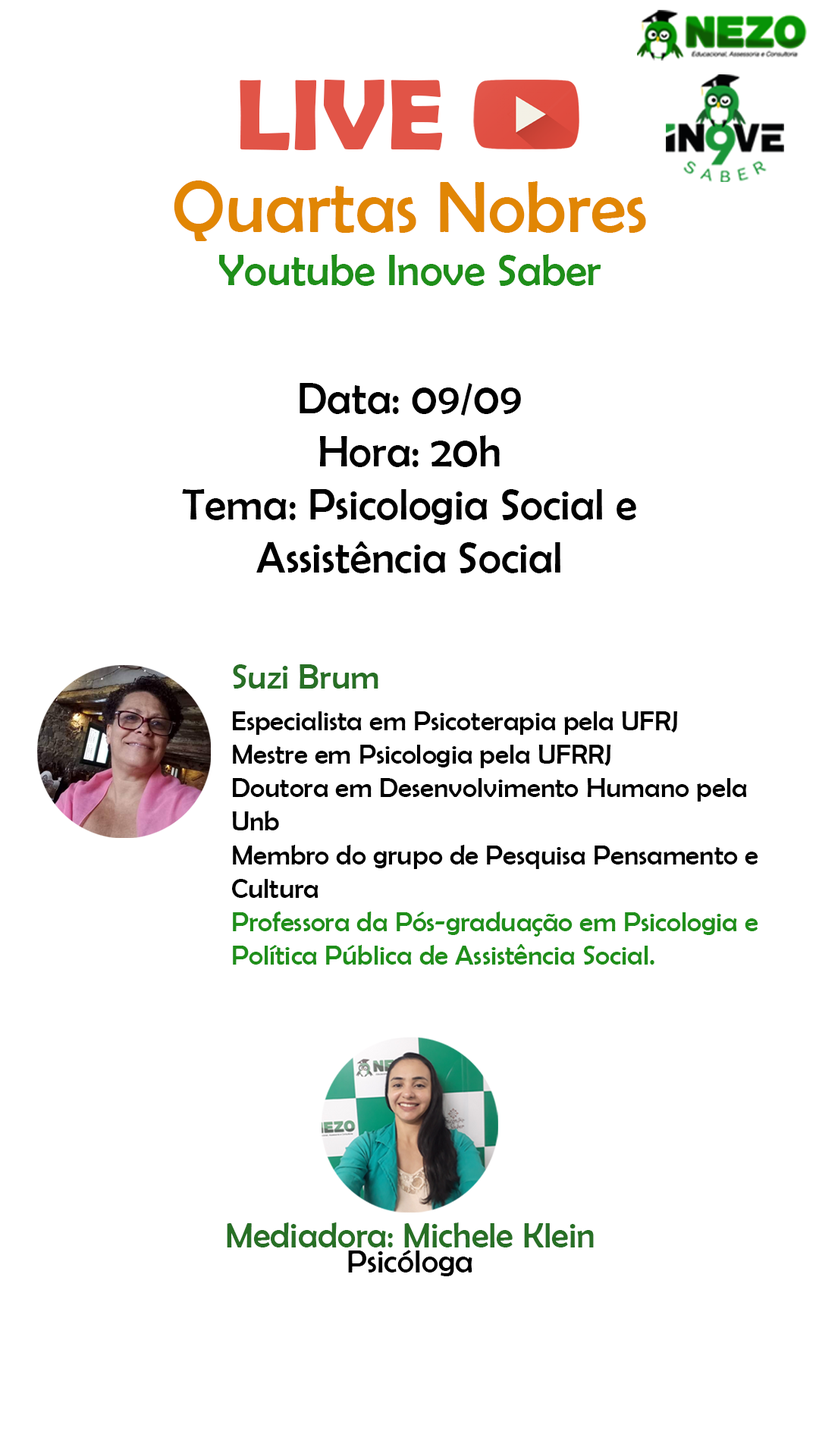
<style>
.page{position:relative;width:819px;height:1456px;background:#ffffff}
.page>*{position:absolute;margin:0}
.t1{font:101.6px "BerlinSansFBDemi-Bold";color:#e15447}
.t2{font:43.8px "BerlinSansFB-Reg";color:#1f8f1a}
.t3{font:73px "BerlinSansFB-Reg";color:#e18604}
.t4{font:44.2px "BerlinSansFB-Reg";color:#000000}
.t5{font:44.2px/63.2px "BerlinSansFB-Reg";color:#000000}
.t6{font:28px "BerlinSansFB-Reg";color:#000000}
.t7{font:35px "BerlinSansFB-Reg";color:#287026}
.t8{font:28px/0px "BerlinSansFB-Reg";color:#000000}
.t9{font:28px "BerlinSansFB-Reg";color:#1f8f1a}
.t10{font:35.5px "BerlinSansFB-Reg";color:#287026}
.t11{font:32.9px/25.1px "BerlinSansFB-Reg";color:#000000}
</style>
<div class="page">
<p class="t1" style="left:240px;top:80px;width:203px;height:70px">LIVE</p>
<p class="t2" style="left:174px;top:180px;width:472px;height:106px;text-align:center"><span class="t3">Quartas Nobres<br></span>Youtube Inove Saber</p>
<p class="t4" style="left:182px;top:383px;width:454px;height:190px;text-align:center"><span class="t5">Data: 09/09<br></span>Hora: 20h<br>Tema: Psicologia Social e Assistência Social</p>
<p class="t6" style="left:232px;top:664px;width:526px;height:301px"><span class="t7">Suzi Brum<br><br></span><span class="t8">Especialista em Psicoterapia pela UFRJ<br></span>Mestre em Psicologia pela UFRRJ<br>Doutora em Desenvolvimento Humano pela Unb<br>Membro do grupo de Pesquisa Pensamento e Cultura<br><span class="t9">Professora da Pós-graduação em Psicologia e Política Pública de Assistência Social.</span></p>
<p class="t10" style="left:227px;top:1222px;width:367px;height:54px;text-align:center">Mediadora: Michele Klein<br><span class="t11">Psicóloga</span></p>
</div>
